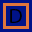
<style>
.page{position:relative;width:32px;height:32px;background:#001388}
.page>*{position:absolute;margin:0}
.t1{font:20px "MyriadPro-Regular";color:#000000}
</style>
<div class="page">
<p class="t1" style="left:10px;top:9px;width:12px;height:14px">D</p>
</div>
